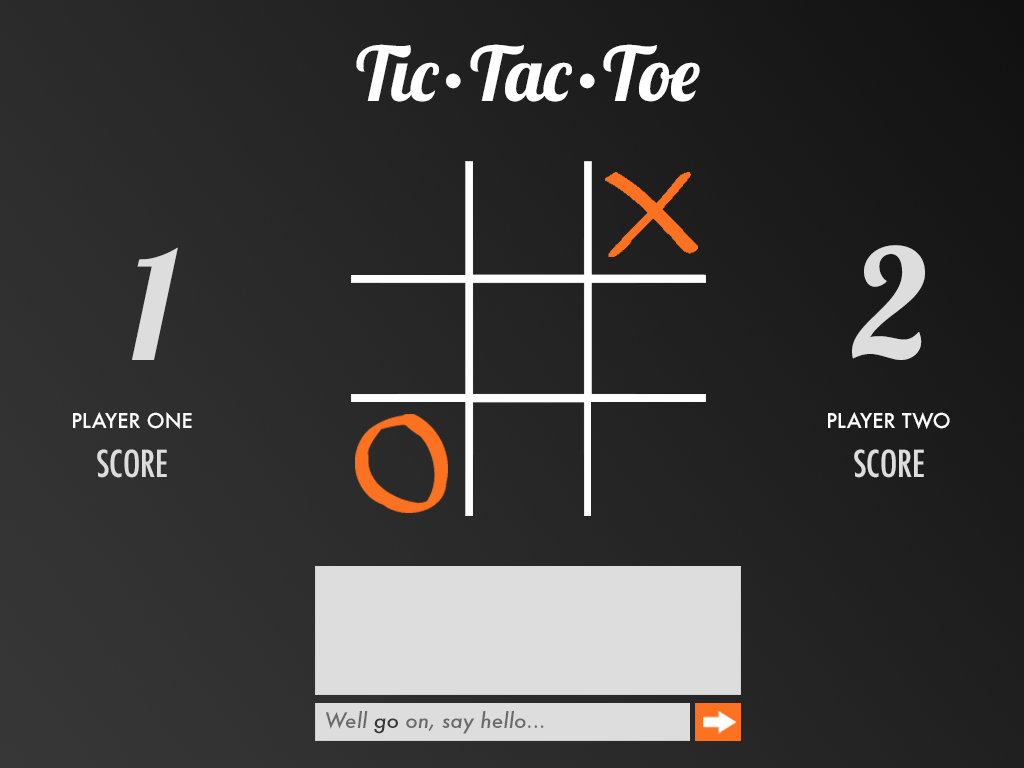
<style>
.page{position:relative;width:1024px;height:768px}
.page>*{position:absolute;margin:0}
.t1{font:75px "Lobster-Regular";color:#ffffff}
.t2{font:150px "Lobster-Regular";color:#dddddd}
.t3{font:20px "Futura-Medium";color:#ffffff}
.t4{font:36px "Futura-CondensedMedium";color:#dddddd}
.t5{font:20.7px "Futura-MediumItalic";color:#6a6a6a}
.t6{font:20.7px "Futura-MediumItalic";color:#373637}
</style>
<div class="page">
<p class="t1" style="left:356px;top:44px;width:344px;height:58px">Tic•Tac•Toe</p>
<p class="t2" style="left:852px;top:245px;width:73px;height:115px">2</p>
<p class="t2" style="left:132px;top:247px;width:46px;height:113px">1</p>
<p class="t3" style="left:73px;top:412px;width:119px;height:17px">PLAYER ONE</p>
<p class="t3" style="left:828px;top:412px;width:122px;height:17px">PLAYER TWO</p>
<p class="t4" style="left:97px;top:449px;width:70px;height:29px">SCORE</p>
<p class="t4" style="left:854px;top:449px;width:70px;height:29px">SCORE</p>
<p class="t5" style="left:326px;top:711px;width:218px;height:23px">Well <span class="t6">go </span>on, say hello...</p>
</div>
